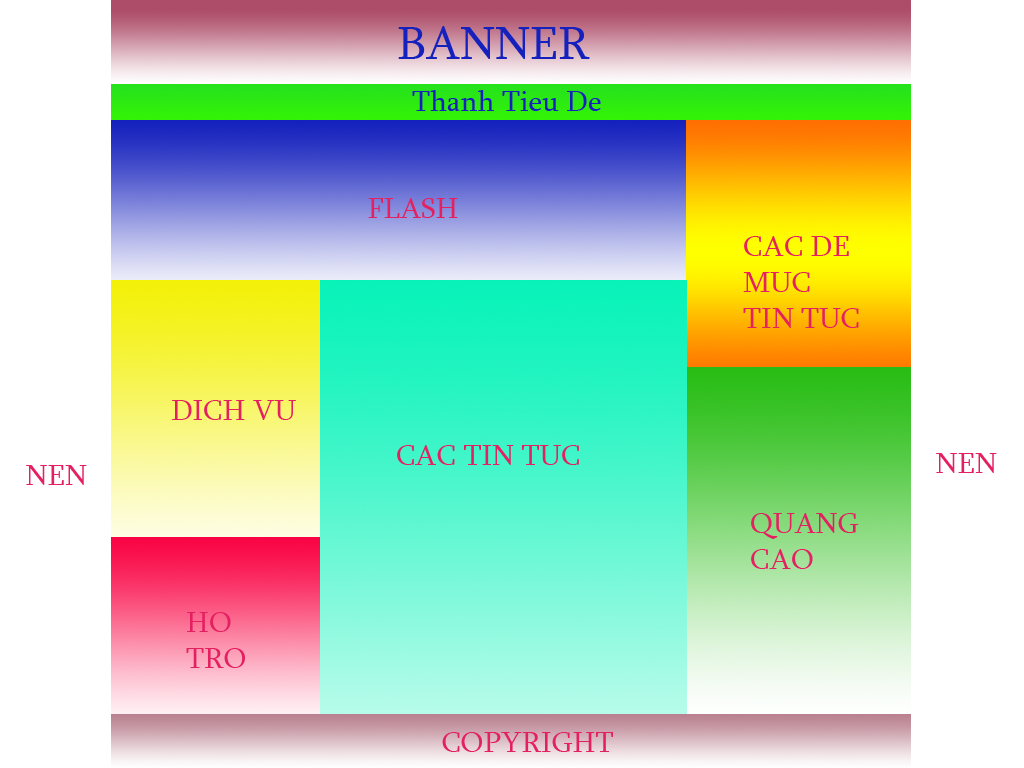
<style>
.page{position:relative;width:1024px;height:768px;background:#ffffff}
.page>*{position:absolute;margin:0}
.t1{font:48px "Sylfaen";color:#1521bd}
.t2{font:30px "Sylfaen";color:#1521bd}
.t3{font:30px "Sylfaen";color:#e52061}
</style>
<div class="page">
<p class="t1" style="left:398px;top:26px;width:192px;height:33px">BANNER</p>
<p class="t2" style="left:412px;top:90px;width:189px;height:21px">Thanh Tieu De</p>
<p class="t3" style="left:368px;top:198px;width:90px;height:20px">FLASH</p>
<p class="t3" style="left:743px;top:236px;width:116px;height:92px">CAC DE <br>MUC<br>TIN TUC</p>
<p class="t3" style="left:172px;top:400px;width:124px;height:20px">DICH VU</p>
<p class="t3" style="left:397px;top:445px;width:182px;height:20px">CAC TIN TUC</p>
<p class="t3" style="left:936px;top:453px;width:61px;height:20px">NEN</p>
<p class="t3" style="left:26px;top:465px;width:61px;height:20px">NEN</p>
<p class="t3" style="left:751px;top:513px;width:108px;height:56px">QUANG <br>CAO</p>
<p class="t3" style="left:186px;top:612px;width:59px;height:56px">HO <br>TRO</p>
<p class="t3" style="left:442px;top:732px;width:171px;height:20px">COPYRIGHT</p>
</div>
